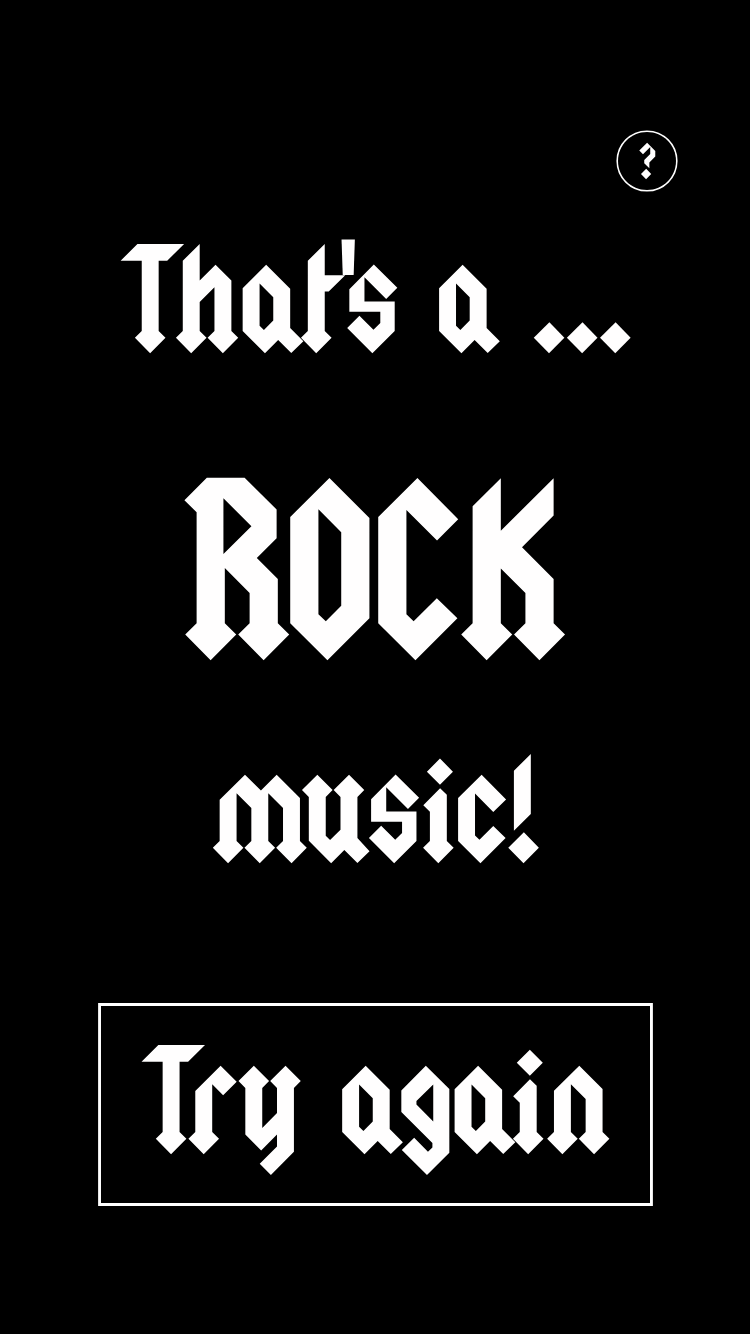
<style>
.page{position:relative;width:750px;height:1334px;background:#000000}
.page>*{position:absolute;margin:0}
.t1{font:40px "Squealer";color:#fffefe}
.t2{font:120px "Squealer";color:#fffefe}
.t3{font:200px "Squealer";color:#fffefe}
</style>
<div class="page">
<p class="t1" style="left:639px;top:142px;width:17px;height:38px">?</p>
<p class="t2" style="left:120px;top:239px;width:511px;height:115px">That's a ...</p>
<p class="t3" style="left:184px;top:477px;width:382px;height:184px">ROCK</p>
<p class="t2" style="left:212px;top:753px;width:327px;height:111px">music!</p>
<p class="t2" style="left:141px;top:1044px;width:469px;height:132px">Try again</p>
</div>
